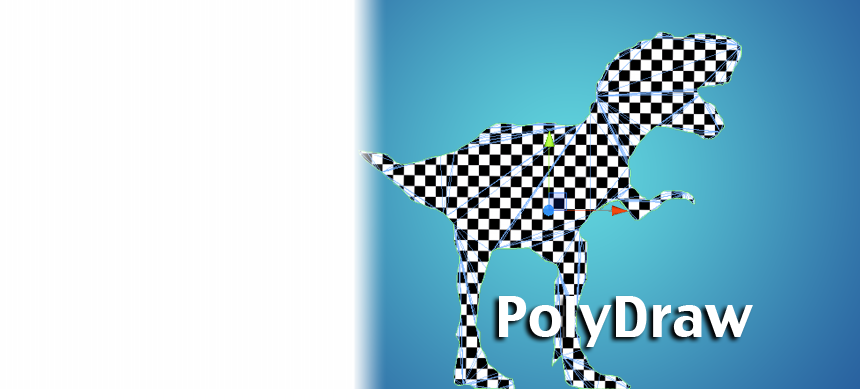
<style>
.page{position:relative;width:860px;height:389px;background:#fefefe}
.page>*{position:absolute;margin:0}
.t1{font:54.5px "CharcoalCY";color:#ffffff}
</style>
<div class="page">
<p class="t1" style="left:499px;top:296px;width:254px;height:51px">PolyDraw</p>
</div>
